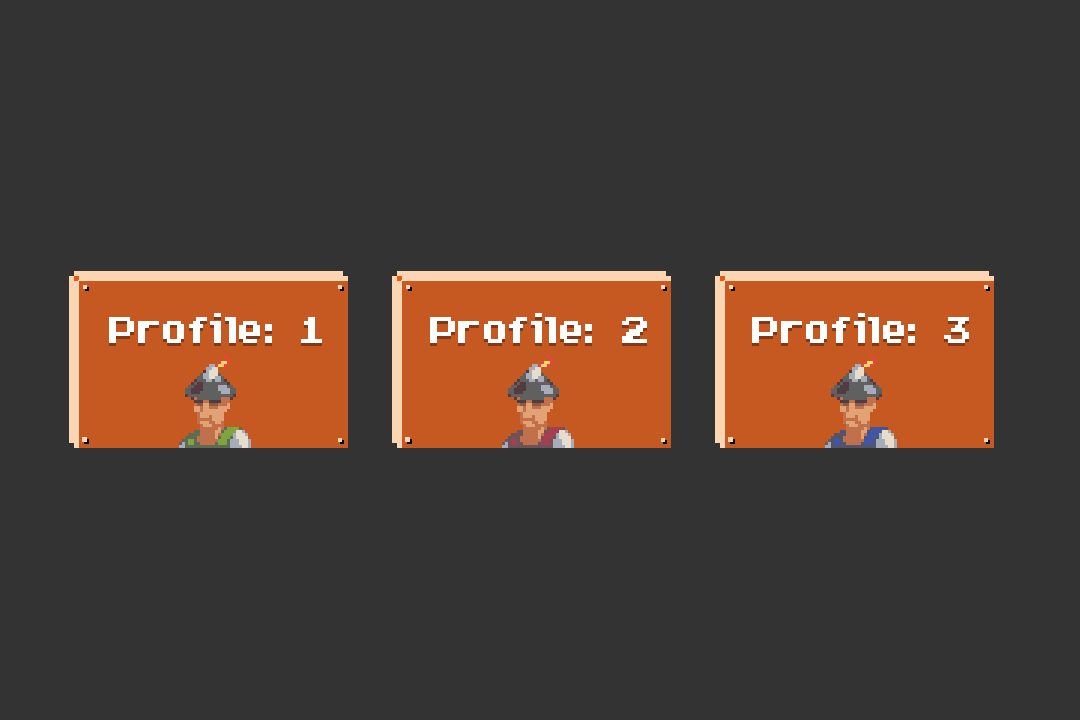
<style>
.page{position:relative;width:1080px;height:720px;background:#333333}
.page>*{position:absolute;margin:0}
.t1{font:37px "Arcadepix";letter-spacing:0.01em;color:#ffffff;scale:0.96 1}
</style>
<div class="page">
<p class="t1" style="left:109px;top:313px;width:213px;height:30px">Profile: 1</p>
<p class="t1" style="left:430px;top:313px;width:217px;height:30px">Profile: 2</p>
<p class="t1" style="left:752px;top:313px;width:217px;height:30px">Profile: 3</p>
</div>
